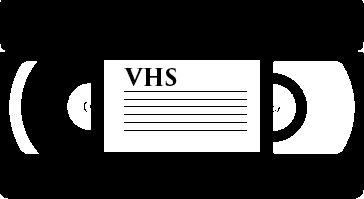
<style>
.page{position:relative;width:364px;height:199px;background:#000000}
.page>*{position:absolute;margin:0}
.t1{font:23px "TrajanPro3-Bold";color:#000000}
</style>
<div class="page">
<p class="t1" style="left:124px;top:68px;width:53px;height:18px">VHS</p>
</div>
